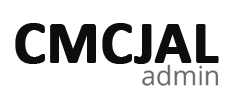
<style>
.page{position:relative;width:233px;height:108px;background:#ffffff}
.page>*{position:absolute;margin:0}
.t1{font:60px "Calibri-Bold";color:#0d0d0d;font-weight:bold}
</style>
<div class="page">
<p class="t1" style="left:15px;top:23px;width:204px;height:41px">CMCJAL</p>
</div>
